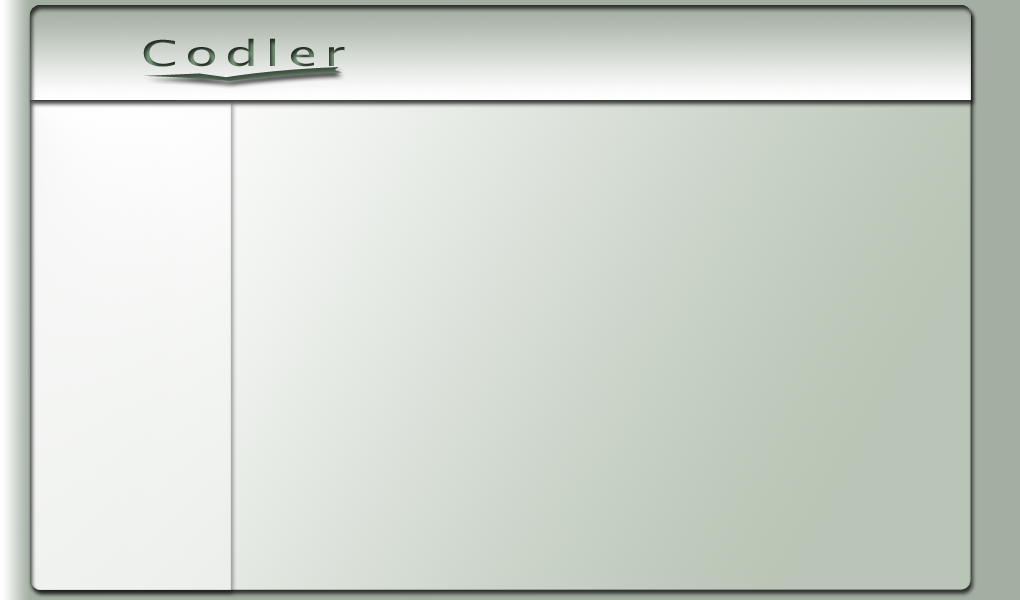
<style>
.page{position:relative;width:1020px;height:600px}
.page>*{position:absolute;margin:0}
.t1{font:35.4px "LucidaSansUnicode";letter-spacing:0.2em;scale:1.5 1}
</style>
<div class="page">
<p class="t1" style="left:143px;top:38px;width:202px;height:29px">Codler</p>
</div>
